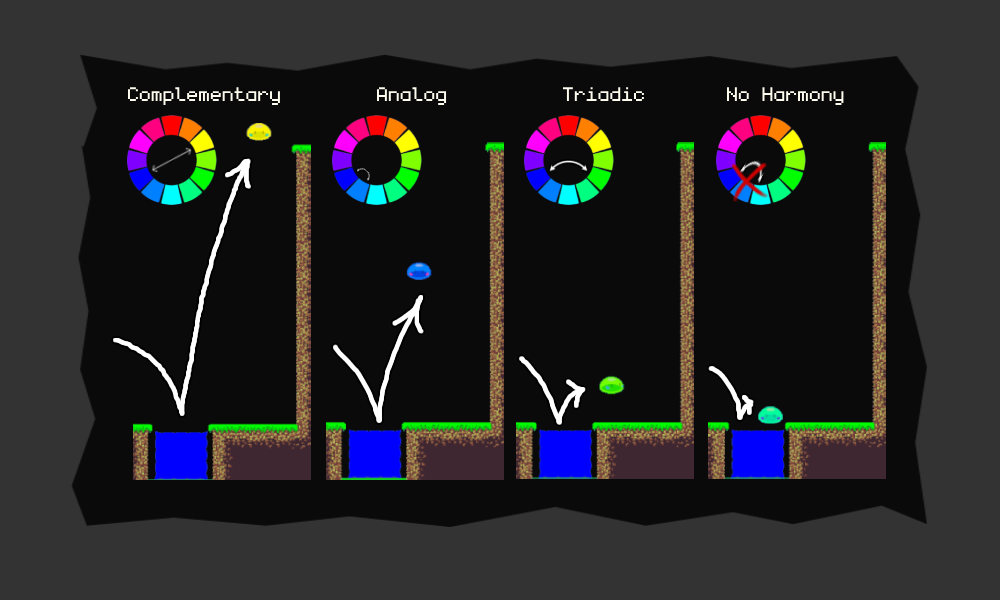
<style>
.page{position:relative;width:1000px;height:600px;background:#0a0a0a}
.page>*{position:absolute;margin:0}
.t1{font:31.6px "monogram";color:#fefcef}
</style>
<div class="page">
<p class="t1" style="left:128px;top:87px;width:152px;height:18px">Complementary</p>
<p class="t1" style="left:377px;top:87px;width:70px;height:18px">Analog</p>
<p class="t1" style="left:563px;top:87px;width:81px;height:15px">Triadic</p>
<p class="t1" style="left:727px;top:87px;width:117px;height:18px">No Harmony</p>
</div>
